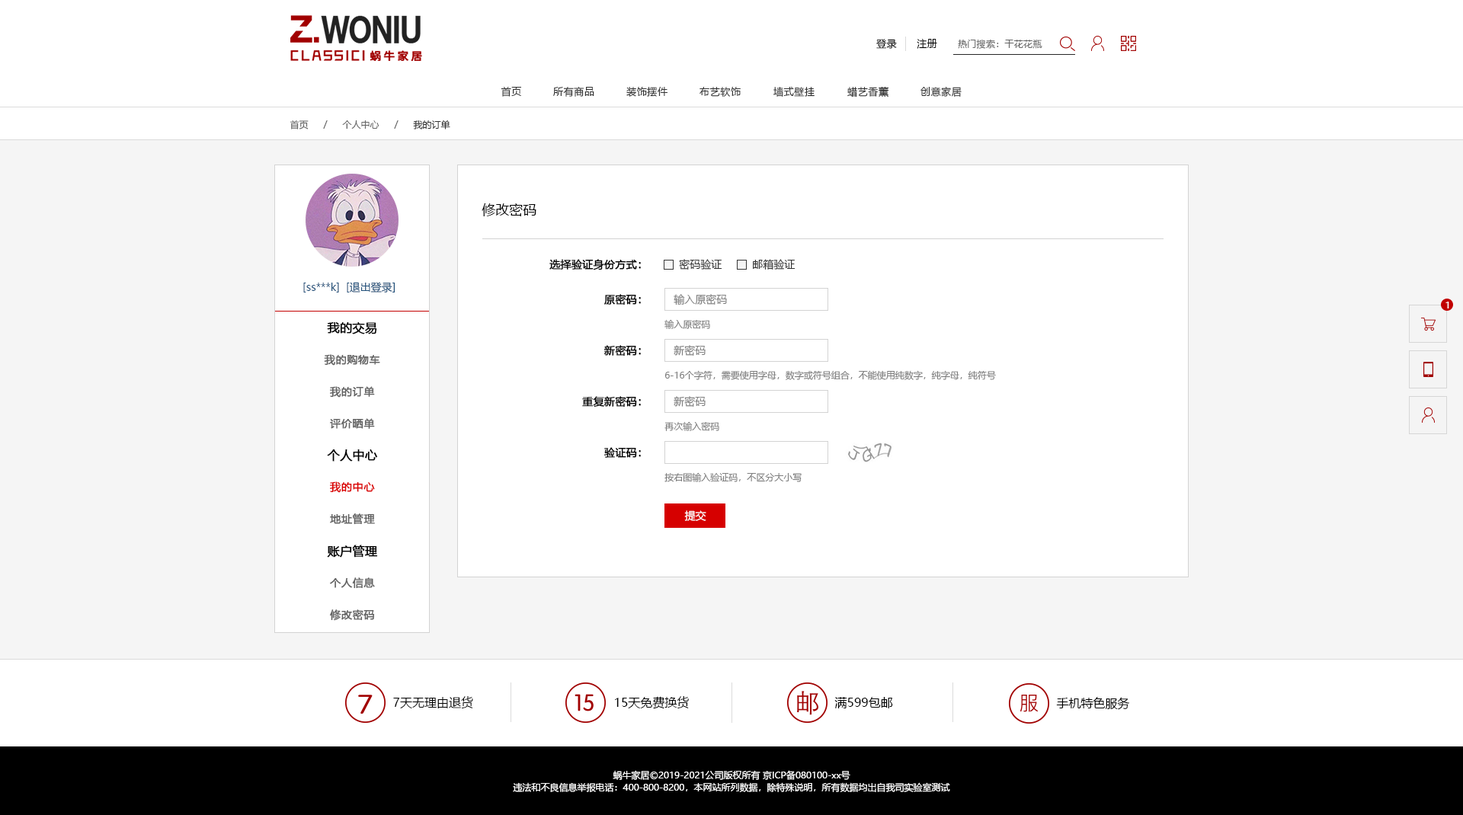
<style>
.page{position:relative;width:1463px;height:815px;background:#ffffff}
.page>*{position:absolute;margin:0}
.t1{font:9.9px "MicrosoftYaHei";letter-spacing:0.05em;color:#000000}
.t2{font:9.1px "MicrosoftYaHei";letter-spacing:0.025em;color:#686868}
.t3{font:9.9px "MicrosoftYaHei";letter-spacing:0.05em;color:#333333}
.t4{font:9.1px "MicrosoftYaHei";color:#666666}
.t5{font:9.1px "MicrosoftYaHei";color:#333333}
.t6{font:13.7px "MicrosoftYaHei";color:#000000}
.t7{font:10.7px "MicrosoftYaHei";color:#000000;font-weight:bold}
.t8{font:10.7px "MicrosoftYaHei";color:#333333}
.t9{font:10.7px "MicrosoftYaHei";color:#23527c}
.t10{font:10.7px "MicrosoftYaHei";color:#808080}
.t11{font:9.1px "MicrosoftYaHei";letter-spacing:0.025em;color:#ffffff}
.t12{font:12.2px "MicrosoftYaHei";color:#000000;font-weight:bold}
.t13{font:9.1px "MicrosoftYaHei";color:#808080}
.t14{font:10.7px "MicrosoftYaHei";letter-spacing:0.025em;color:#626262;font-weight:bold}
.t15{font:10.7px "MicrosoftYaHei";letter-spacing:0.025em;color:#db0000;font-weight:bold}
.t16{font:10.7px "MicrosoftYaHei";color:#ffffff}
.t17{font:12.2px "MicrosoftYaHei";color:#000000}
.t18{font:9.1px/12.2px "MicrosoftYaHei";color:#ffffff}
</style>
<div class="page">
<p class="t1" style="left:876px;top:39px;width:21px;height:10px">登录</p>
<p class="t1" style="left:917px;top:39px;width:20px;height:10px">注册</p>
<p class="t2" style="left:958px;top:39px;width:84px;height:10px">热门搜索：干花花瓶</p>
<p class="t3" style="left:501px;top:87px;width:20px;height:10px">首页</p>
<p class="t3" style="left:553px;top:87px;width:41px;height:10px">所有商品</p>
<p class="t3" style="left:626px;top:87px;width:41px;height:10px">装饰摆件</p>
<p class="t3" style="left:699px;top:87px;width:42px;height:10px">布艺软饰</p>
<p class="t3" style="left:773px;top:87px;width:41px;height:10px">墙式壁挂</p>
<p class="t3" style="left:847px;top:86px;width:42px;height:12px">蜡艺香薰</p>
<p class="t3" style="left:920px;top:87px;width:41px;height:10px">创意家居</p>
<p class="t4" style="left:290px;top:120px;width:19px;height:10px">首页</p>
<p class="t4" style="left:323px;top:120px;width:5px;height:9px">/</p>
<p class="t4" style="left:342px;top:120px;width:37px;height:9px">个人中心</p>
<p class="t4" style="left:394px;top:120px;width:4px;height:9px">/</p>
<p class="t5" style="left:413px;top:120px;width:37px;height:10px">我的订单</p>
<p class="t6" style="left:481px;top:203px;width:55px;height:13px">修改密码</p>
<p class="t7" style="left:549px;top:259px;width:92px;height:11px">选择验证身份方式：</p>
<p class="t8" style="left:679px;top:259px;width:43px;height:11px">密码验证</p>
<p class="t8" style="left:753px;top:259px;width:42px;height:11px">邮箱验证</p>
<p class="t9" style="left:347px;top:282px;width:48px;height:11px">[退出登录]</p>
<p class="t9" style="left:303px;top:283px;width:36px;height:10px">[ss***k]</p>
<p class="t7" style="left:604px;top:294px;width:37px;height:11px">原密码：</p>
<p class="t10" style="left:673px;top:294px;width:54px;height:12px">输入原密码</p>
<p class="t11" style="left:1445px;top:302px;width:4px;height:7px">1</p>
<p class="t12" style="left:327px;top:322px;width:50px;height:12px">我的交易</p>
<p class="t13" style="left:664px;top:319px;width:46px;height:10px">输入原密码</p>
<p class="t7" style="left:603px;top:345px;width:38px;height:11px">新密码：</p>
<p class="t10" style="left:673px;top:345px;width:32px;height:11px">新密码</p>
<p class="t14" style="left:324px;top:354px;width:56px;height:12px">我的购物车</p>
<p class="t13" style="left:664px;top:370px;width:332px;height:10px">6-16个字符，需要使用字母，数字或符号组合，不能使用纯数字，纯字母，纯符号</p>
<p class="t14" style="left:330px;top:386px;width:45px;height:12px">我的订单</p>
<p class="t7" style="left:582px;top:396px;width:59px;height:12px">重复新密码：</p>
<p class="t10" style="left:673px;top:396px;width:32px;height:11px">新密码</p>
<p class="t14" style="left:330px;top:418px;width:45px;height:11px">评价晒单</p>
<p class="t13" style="left:664px;top:421px;width:55px;height:10px">再次输入密码</p>
<p class="t12" style="left:327px;top:449px;width:51px;height:13px">个人中心</p>
<p class="t7" style="left:604px;top:447px;width:37px;height:11px">验证码：</p>
<p class="t13" style="left:664px;top:472px;width:137px;height:10px">按右图输入验证码，不区分大小写</p>
<p class="t15" style="left:330px;top:481px;width:45px;height:12px">我的中心</p>
<p class="t14" style="left:330px;top:513px;width:45px;height:12px">地址管理</p>
<p class="t16" style="left:684px;top:510px;width:22px;height:11px">提交</p>
<p class="t12" style="left:327px;top:545px;width:51px;height:13px">账户管理</p>
<p class="t14" style="left:330px;top:577px;width:45px;height:12px">个人信息</p>
<p class="t14" style="left:330px;top:609px;width:45px;height:12px">修改密码</p>
<p class="t17" style="left:393px;top:696px;width:80px;height:13px">7天无理由退货</p>
<p class="t17" style="left:615px;top:696px;width:74px;height:13px">15天免费换货</p>
<p class="t17" style="left:834px;top:697px;width:59px;height:12px">满599包邮</p>
<p class="t17" style="left:1056px;top:697px;width:74px;height:13px">手机特色服务</p>
<p class="t18" style="left:513px;top:770px;width:437px;height:22px;text-align:center">蜗牛家居©2019-2021公司版权所有 京ICP备080100-xx号<br>违法和不良信息举报电话：400-800-8200，本网站所列数据，除特殊说明，所有数据均出自我司实验室测试</p>
</div>
